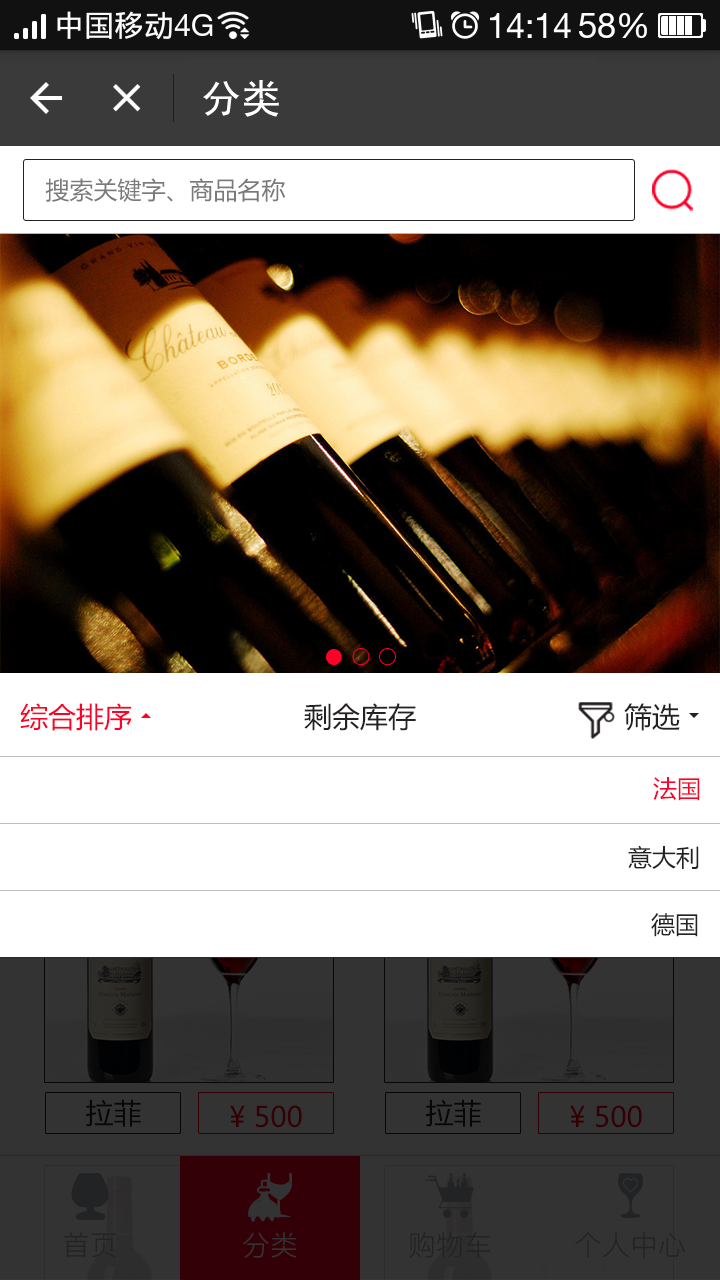
<style>
.page{position:relative;width:720px;height:1280px;background:#ffffff}
.page>*{position:absolute;margin:0}
.t1{font:40px "SimHei";color:#ffffff}
.t2{font:24px "MicrosoftYaHei";color:#7a7a7a}
.t3{font:28px "MicrosoftYaHei";color:#ff0029}
.t4{font:28px "MicrosoftYaHei";color:#242120}
.t5{font:24px "MicrosoftYaHei";color:#ff0029;text-transform:uppercase}
.t6{font:24px "MicrosoftYaHei";color:#242120;text-transform:uppercase}
.t7{font:28px "MicrosoftYaHei";color:#070706;text-transform:uppercase}
.t8{font:28px "MicrosoftYaHei";color:#330008}
.t9{font:28px "PingFang-SC-Regular";color:#222325;text-transform:uppercase}
.t10{font:28px "PingFang-SC-Regular";color:#333333;text-transform:uppercase}
.t11{font:28px "PingFang-SC-Regular";color:#222222;text-transform:uppercase}
</style>
<div class="page">
<p class="t1" style="left:203px;top:80px;width:76px;height:37px">分类</p>
<p class="t2" style="left:45px;top:178px;width:241px;height:24px">搜索关键字、商品名称</p>
<p class="t3" style="left:20px;top:703px;width:112px;height:28px">综合排序</p>
<p class="t4" style="left:304px;top:703px;width:112px;height:28px">剩余库存</p>
<p class="t4" style="left:624px;top:703px;width:56px;height:28px">筛选</p>
<p class="t5" style="left:653px;top:777px;width:47px;height:24px">法国</p>
<p class="t6" style="left:628px;top:845px;width:71px;height:24px">意大利</p>
<p class="t6" style="left:651px;top:913px;width:47px;height:24px">德国</p>
<p class="t7" style="left:86px;top:1099px;width:55px;height:28px">拉菲</p>
<p class="t8" style="left:230px;top:1105px;width:72px;height:23px">¥ 500</p>
<p class="t7" style="left:426px;top:1099px;width:55px;height:28px">拉菲</p>
<p class="t8" style="left:570px;top:1105px;width:72px;height:23px">¥ 500</p>
<p class="t9" style="left:63px;top:1232px;width:54px;height:26px">首页</p>
<p class="t10" style="left:243px;top:1232px;width:54px;height:26px">分类</p>
<p class="t11" style="left:409px;top:1232px;width:81px;height:26px">购物车</p>
<p class="t9" style="left:575px;top:1232px;width:110px;height:26px">个人中心</p>
</div>
